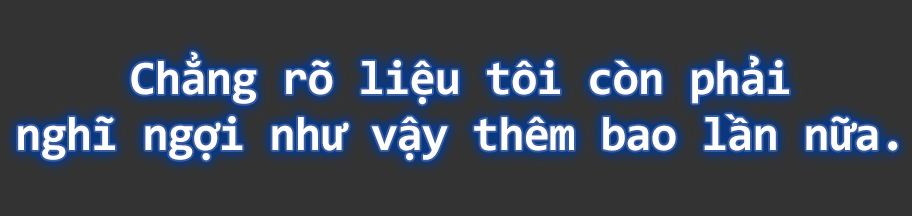
<style>
.page{position:relative;width:912px;height:216px;background:#333333}
.page>*{position:absolute;margin:0}
.t1{font:48px/48px "Consolas-Bold";letter-spacing:-0.02em;color:#fefefe}
</style>
<div class="page">
<p class="t1" style="left:18px;top:52px;width:880px;height:109px;text-align:center">Chẳng rõ liệu tôi còn phải<br>nghĩ ngợi như vậy thêm bao lần nữa.</p>
</div>
